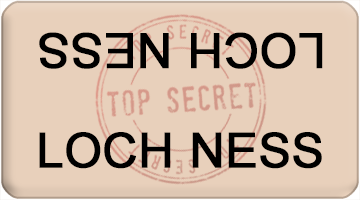
<style>
.page{position:relative;width:360px;height:200px;background:#e8d0bb}
.page>*{position:absolute;margin:0}
.t1{font:48px "ArialMT";color:#000000;font-weight:bold}
</style>
<div class="page">
<p class="t1" style="left:39px;top:32px;width:284px;height:37px;rotate:180deg">LOCH NESS</p>
<p class="t1" style="left:39px;top:132px;width:283px;height:37px">LOCH NESS</p>
</div>
